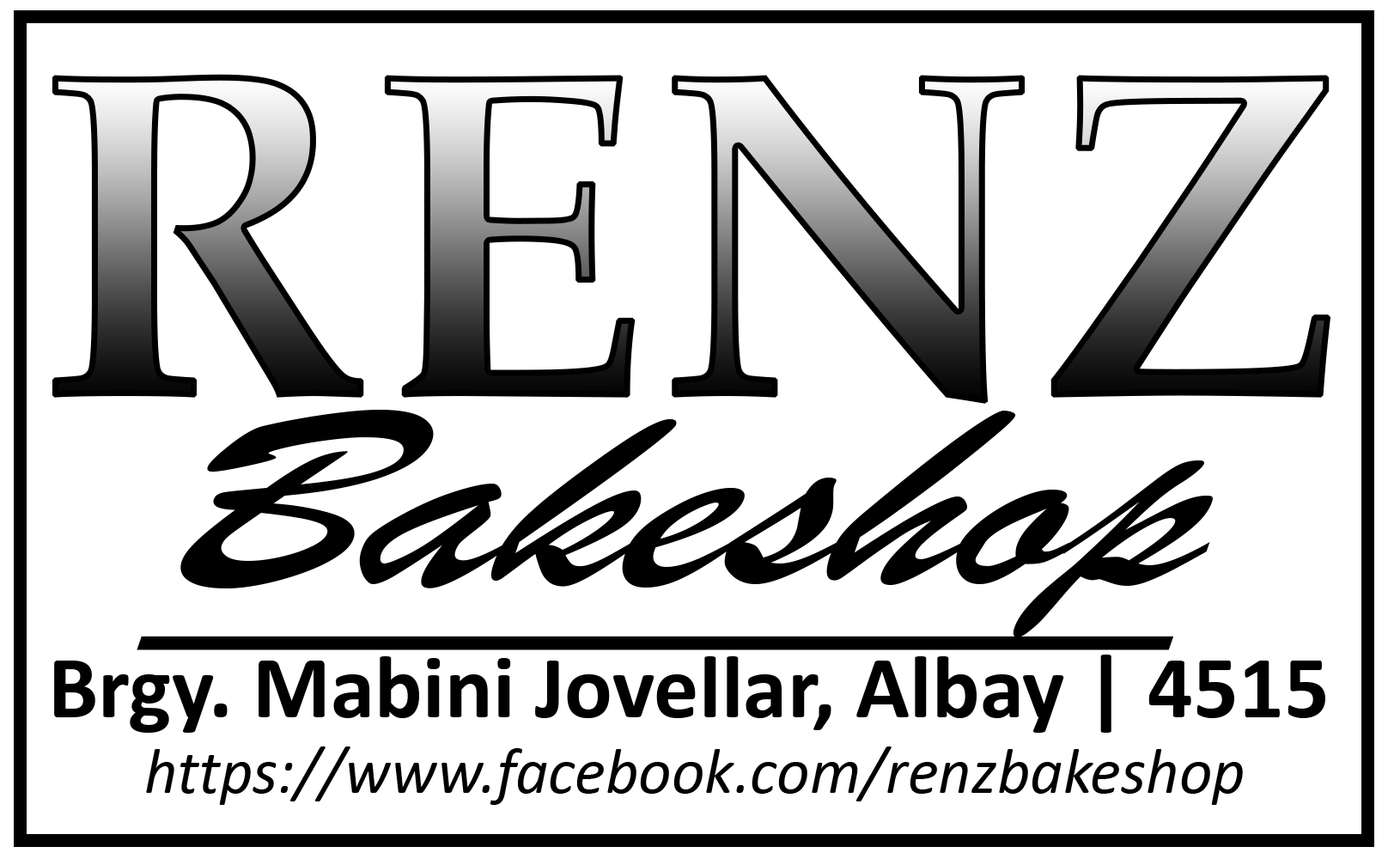
<style>
.page{position:relative;width:1388px;height:859px;background:#ffffff}
.page>*{position:absolute;margin:0}
.t1{font:465.3px "PalatinoLinotype-Bold"}
.t2{font:284.1px "BrushScriptMT";color:#000000;text-decoration:underline;scale:1.21 1}
.t3{font:89.5px "Calibri-Bold";color:#000000}
.t4{font:64.4px "Calibri-Italic";color:#000000}
</style>
<div class="page">
<p class="t1" style="left:52px;top:74px;width:1279px;height:330px">RENZ</p>
<p class="t2" style="left:137px;top:410px;width:1076px;height:240px">Bakeshop</p>
<p class="t3" style="left:54px;top:655px;width:1271px;height:78px">Brgy. Mabini Jovellar, Albay | 4515</p>
<p class="t4" style="left:146px;top:746px;width:1097px;height:59px">https://www.facebook.com/renzbakeshop</p>
</div>
